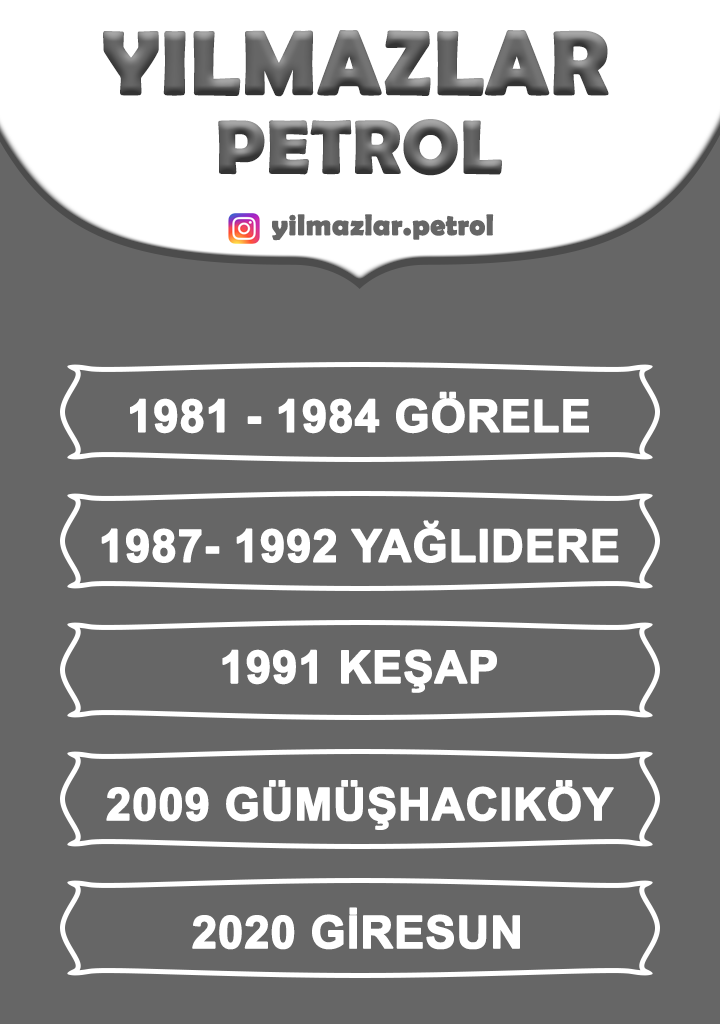
<style>
.page{position:relative;width:720px;height:1024px;background:#666666}
.page>*{position:absolute;margin:0}
.t1{font:90px "BerlinSansFBDemi-Bold";color:#666666;font-weight:bold}
.t2{font:74.8px "BerlinSansFBDemi-Bold";font-weight:bold}
.t3{font:29.2px "BerlinSansFBDemi-Bold";color:#666666;font-weight:bold}
.t4{font:45px "Arial-BoldMT";color:#ffffff;font-weight:bold}
</style>
<div class="page">
<p class="t1" style="left:103px;top:30px;width:506px;height:67px">YILMAZLAR</p>
<p class="t2" style="left:218px;top:119px;width:284px;height:57px">PETROL</p>
<p class="t3" style="left:272px;top:214px;width:222px;height:27px">yilmazlar.petrol</p>
<p class="t4" style="left:130px;top:391px;width:459px;height:43px">1981 - 1984 GÖRELE</p>
<p class="t4" style="left:101px;top:520px;width:518px;height:43px">1987- 1992 YAĞLIDERE</p>
<p class="t4" style="left:222px;top:649px;width:275px;height:44px">1991 KEŞAP</p>
<p class="t4" style="left:106px;top:780px;width:508px;height:50px">2009 GÜMÜŞHACIKÖY</p>
<p class="t4" style="left:192px;top:907px;width:328px;height:43px">2020 GİRESUN</p>
</div>
